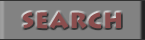
<style>
.page{position:relative;width:145px;height:40px;background:#828282}
.page>*{position:absolute;margin:0}
.t1{font:22px "Lithograph-Bold";letter-spacing:0.05em;color:#8b4e4e}
</style>
<div class="page">
<p class="t1" style="left:22px;top:11px;width:99px;height:18px">Search</p>
</div>
